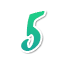
<style>
.page{position:relative;width:64px;height:64px;background:#ffffff}
.page>*{position:absolute;margin:0}
.t1{font:72px "MaroonedOnMarsBB";color:#1cba90}
</style>
<div class="page">
<p class="t1" style="left:21px;top:11px;width:24px;height:40px">5</p>
</div>
